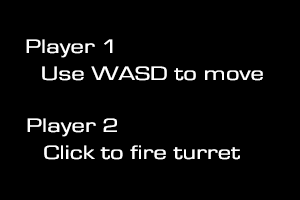
<style>
.page{position:relative;width:300px;height:200px;background:#000000}
.page>*{position:absolute;margin:0}
.t1{font:20px "EurostileRegular";color:#ffffff;scale:1.35 1}
</style>
<div class="page">
<p class="t1" style="left:26px;top:39px;width:87px;height:19px">Player 1</p>
<p class="t1" style="left:42px;top:66px;width:221px;height:15px">Use WASD to move</p>
<p class="t1" style="left:27px;top:118px;width:90px;height:19px">Player 2</p>
<p class="t1" style="left:44px;top:145px;width:196px;height:15px">Click to fire turret</p>
</div>
